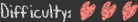
<style>
.page{position:relative;width:138px;height:22px;background:#333333}
.page>*{position:absolute;margin:0}
.t1{font:20px "DJBChalkItUp";scale:0.9 1}
</style>
<div class="page">
<p class="t1" style="left:0px;top:2px;width:72px;height:20px">Difficulty:</p>
</div>
